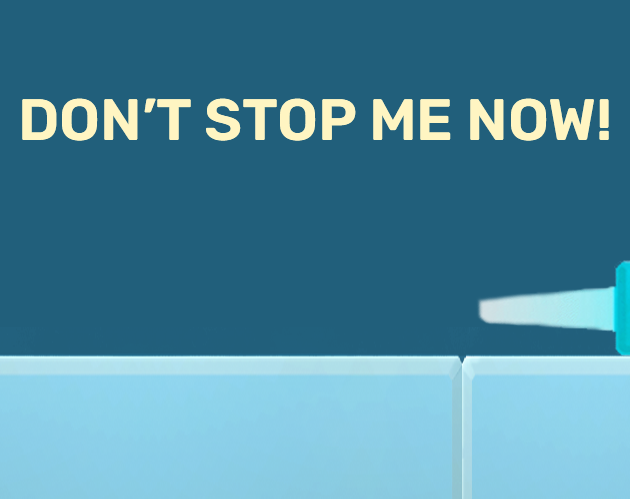
<style>
.page{position:relative;width:630px;height:499px;background:#215f7b}
.page>*{position:absolute;margin:0}
.t1{font:58.3px "Rubik-SemiBold";color:#fff5c2}
</style>
<div class="page">
<p class="t1" style="left:22px;top:98px;width:587px;height:43px">DON’T STOP ME NOW!</p>
</div>
